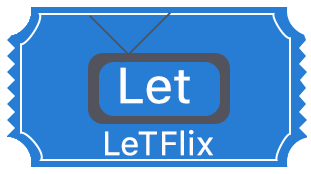
<style>
.page{position:relative;width:311px;height:174px;background:#267dd3}
.page>*{position:absolute;margin:0}
.t1{font:50px "SFUIText-Regular";color:#ffffff;font-weight:bold}
.t2{font:33.3px "SFUIText-Regular";color:#ffffff;font-weight:bold}
</style>
<div class="page">
<p class="t1" style="left:120px;top:67px;width:70px;height:37px">Let</p>
<p class="t2" style="left:105px;top:130px;width:108px;height:26px">LeTFlix</p>
</div>
